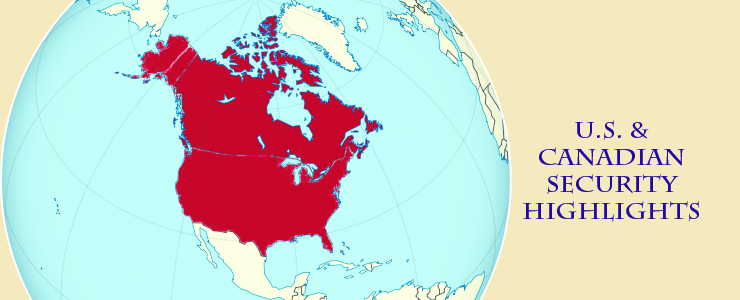
<style>
.page{position:relative;width:740px;height:300px;background:#f4eabe}
.page>*{position:absolute;margin:0}
.t1{font:22.4px "CharlemagneStd-Bold";color:#2108a6;scale:1.07 1}
</style>
<div class="page">
<p class="t1" style="left:523px;top:120px;width:176px;height:102px">U.S. &amp;<br>Canadian<br>Security<br>highlights</p>
</div>
